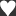
<style>
.page{position:relative;width:16px;height:16px;background:#ffffff}
.page>*{position:absolute;margin:0}
.t1{font:21.2px "RixJGoL";color:#ffffff}
</style>
<div class="page">
<p class="t1" style="left:0px;top:0px;width:16px;height:18px">♥</p>
</div>
